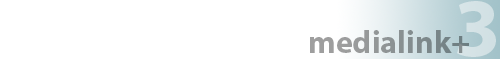
<style>
.page{position:relative;width:500px;height:59px;background:#ffffff}
.page>*{position:absolute;margin:0}
.t1{font:83.7px "MyriadPro-Bold";color:#d3e1e5}
.t2{font:32.2px "MyriadPro-Bold";color:#8e9395}
</style>
<div class="page">
<p class="t1" style="left:457px;top:1px;width:39px;height:56px">3</p>
<p class="t2" style="left:310px;top:30px;width:159px;height:23px">medialink+</p>
</div>
